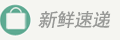
<style>
.page{position:relative;width:120px;height:40px;background:#f5f5f1}
.page>*{position:absolute;margin:0}
.t1{font:18px "SimHei";color:#989997;font-style:italic}
</style>
<div class="page">
<p class="t1" style="left:38px;top:11px;width:73px;height:17px">新鲜速递</p>
</div>
